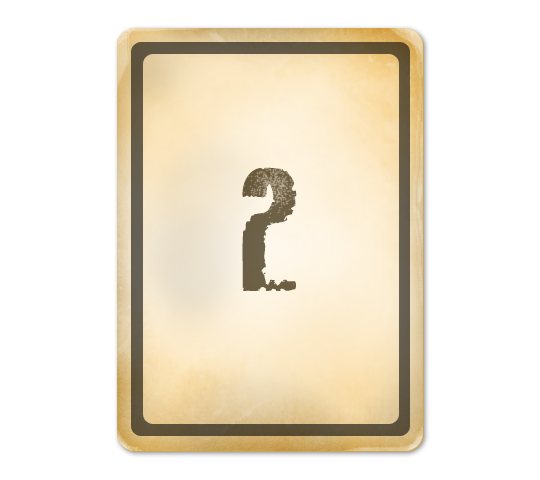
<style>
.page{position:relative;width:540px;height:480px;background:#ffffff}
.page>*{position:absolute;margin:0}
.t1{font:175px "BeeRidgeVintage-SemicondensedBo";color:#6d6147}
</style>
<div class="page">
<p class="t1" style="left:242px;top:167px;width:55px;height:124px">2</p>
</div>
